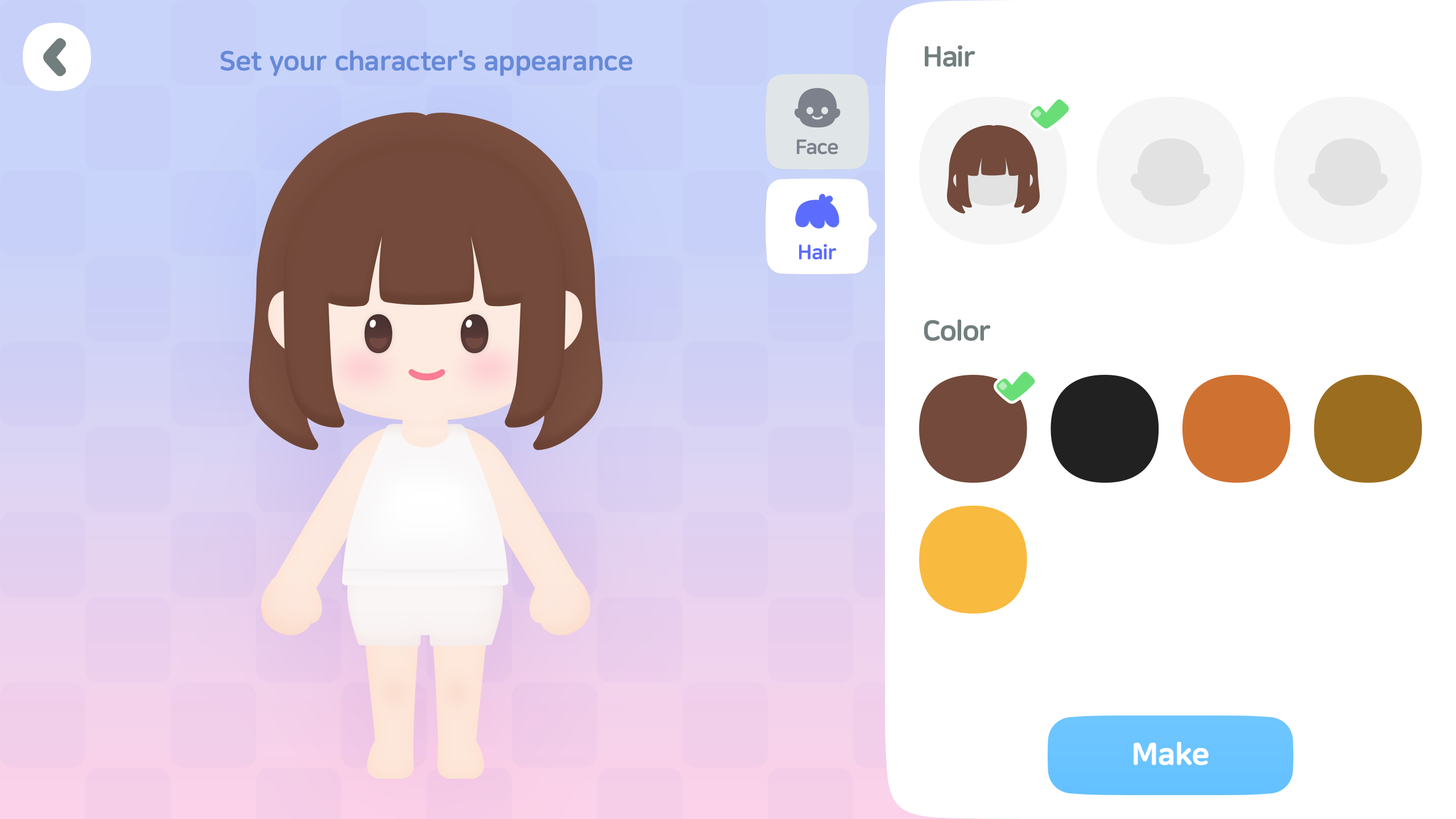
<style>
.page{position:relative;width:1456px;height:819px;background:#ffffff}
.page>*{position:absolute;margin:0}
.t1{font:27.3px "NanumSquareRoundEB";color:#6689d8}
.t2{font:28.4px "NanumSquareRoundEB";letter-spacing:-0.025em;color:#727e7e}
.t3{font:20.5px "NanumSquareRoundEB";letter-spacing:-0.025em;color:#7d818c}
.t4{font:20.5px "NanumSquareRoundEB";letter-spacing:-0.025em;color:#5c6cfc}
.t5{font:30.7px "NanumSquareRoundOTFEB";letter-spacing:-0.025em;color:#ffffff;font-weight:bold}
</style>
<div class="page">
<p class="t1" style="left:221px;top:50px;width:411px;height:26px">Set your character's appearance</p>
<p class="t2" style="left:925px;top:45px;width:50px;height:22px">Hair</p>
<p class="t3" style="left:797px;top:139px;width:41px;height:16px">Face</p>
<p class="t4" style="left:799px;top:244px;width:38px;height:16px">Hair</p>
<p class="t2" style="left:924px;top:319px;width:67px;height:22px">Color</p>
<p class="t5" style="left:1134px;top:742px;width:75px;height:24px">Make</p>
</div>
